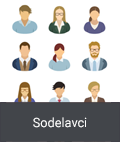
<style>
.page{position:relative;width:120px;height:142px;background:#ffffff}
.page>*{position:absolute;margin:0}
.t1{font:12.8px "Roboto-Regular";color:#ffffff}
</style>
<div class="page">
<p class="t1" style="left:33px;top:117px;width:54px;height:11px">Sodelavci</p>
</div>
